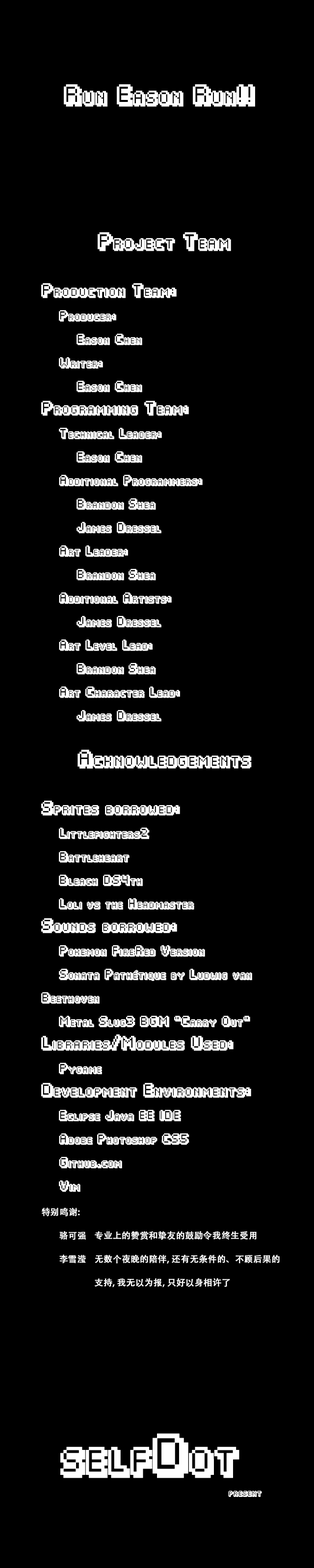
<style>
.page{position:relative;width:314px;height:1568px;background:#000000}
.page>*{position:absolute;margin:0}
.t1{font:17.6px "Fipps-Regular";color:#ffffff;font-variant:small-caps;font-weight:bold}
.t2{font:8.8px/23.5px "Fipps-Regular";color:#ffffff;font-variant:small-caps;font-weight:bold}
.t3{font:14.7px/23.5px "Fipps-Regular";color:#ffffff;font-variant:small-caps;font-weight:bold}
.t4{font:11.8px/23.5px "Fipps-Regular";color:#ffffff;font-variant:small-caps;font-weight:bold}
.t5{font:8.8px/23.5px "AdobeHeitiStd-Regular";color:#ffffff;font-variant:small-caps;font-weight:bold}
.t6{font:35.3px "Fipps-Regular";color:#ffffff;font-variant:small-caps;font-weight:bold}
.t7{font:6.9px "Fipps-Regular";color:#ffffff;font-variant:small-caps;font-weight:bold}
</style>
<div class="page">
<p class="t1" style="left:64px;top:84px;width:191px;height:23px">Run Eason Run!!</p>
<p class="t2" style="left:41px;top:232px;width:238px;height:1055px;text-align:center"><span class="t3">Project Team<br><br></span><span class="t4">Production Team:<br> </span>Producer: <br>  Eason Chen<br> Writer: <br>  Eason Chen<br><span class="t4">Programming Team:<br></span> Technical Leader: <br>  Eason Chen<br> Additional Programmers: <br>  Brandon Shea<br>  James Dressel<br> Art Leader:<br>  Brandon Shea<br> Additional Artists:<br>  James Dressel<br> Art Level Lead:<br>  Brandon Shea<br> Art Character Lead:<br>  James Dressel<br><br><span class="t3">Acknowledgements<br><br></span><span class="t4">Sprites borrowed:<br> </span>Littlefighters2<br> Battleheart<br> Bleach DS4th<br> Loli vs the Headmaster<br><span class="t4">Sounds borrowed:<br> </span>Pokemon FireRed Version<br> Sonata Pathétique by Ludwig van Beethoven<br> Metal Slug3 BGM “Carry Out”<br><span class="t4">Libraries/Modules Used:<br> </span>Pygame<br><span class="t4">Development Environments:<br> </span>Eclipse Java EE IDE<br> Adobe Photoshop CS5<br> Github.com<br> Vim<br><span class="t5">特别鸣谢:<br> 骆可强 专业上的赞赏和挚友的鼓励令我终生受用<br> 李雪滢 无数个夜晚的陪伴, 还有无条件的、不顾后果的    支持, 我无以为报, 只好以身相许了</span></p>
<p class="t6" style="left:60px;top:1433px;width:179px;height:45px">selfDot</p>
<p class="t7" style="left:228px;top:1491px;width:34px;height:6px">present</p>
</div>
